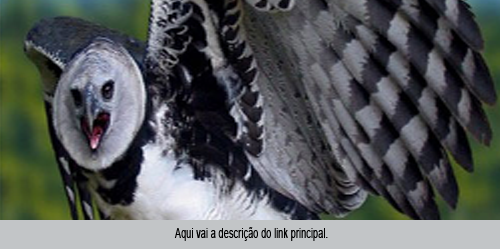
<style>
.page{position:relative;width:500px;height:249px}
.page>*{position:absolute;margin:0}
.t1{font:14px "ArialMT";color:#000000;scale:0.67 1}
</style>
<div class="page">
<p class="t1" style="left:174px;top:227px;width:154px;height:14px">Aqui vai a descrição do link principal.</p>
</div>
